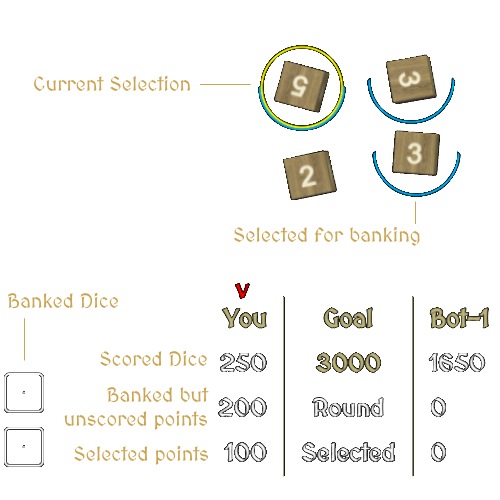
<style>
.page{position:relative;width:500px;height:500px;background:#ffffff}
.page>*{position:absolute;margin:0}
.t1{font:20px "MedievalSharp";color:#cca553}
</style>
<div class="page">
<p class="t1" style="left:34px;top:75px;width:157px;height:17px">Current Selection</p>
<p class="t1" style="left:233px;top:226px;width:187px;height:20px">Selected for banking</p>
<p class="t1" style="left:7px;top:292px;width:112px;height:17px">Banked Dice</p>
<p class="t1" style="left:100px;top:350px;width:107px;height:17px">Scored Dice</p>
<p class="t1" style="left:64px;top:387px;width:145px;height:43px;text-align:right">Banked but<br>unscored points</p>
<p class="t1" style="left:74px;top:445px;width:134px;height:20px">Selected points</p>
</div>
